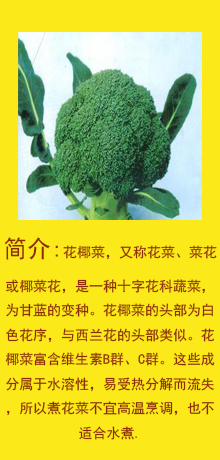
<style>
.page{position:relative;width:220px;height:460px;background:#fbe919}
.page>*{position:absolute;margin:0}
.t1{font:14px "SimHei";color:#8e290a}
.t2{font:24px "SimHei";color:#8e290a}
</style>
<div class="page">
<p class="t1" style="left:4px;top:237px;width:213px;height:203px;text-align:center"><span class="t2">简介:</span>花椰菜，又称花菜、菜花或椰菜花，是一种十字花科蔬菜，为甘蓝的变种。花椰菜的头部为白色花序，与西兰花的头部类似。花椰菜富含维生素B群、C群。这些成分属于水溶性，易受热分解而流失，所以煮花菜不宜高温烹调，也不适合水煮.</p>
</div>
